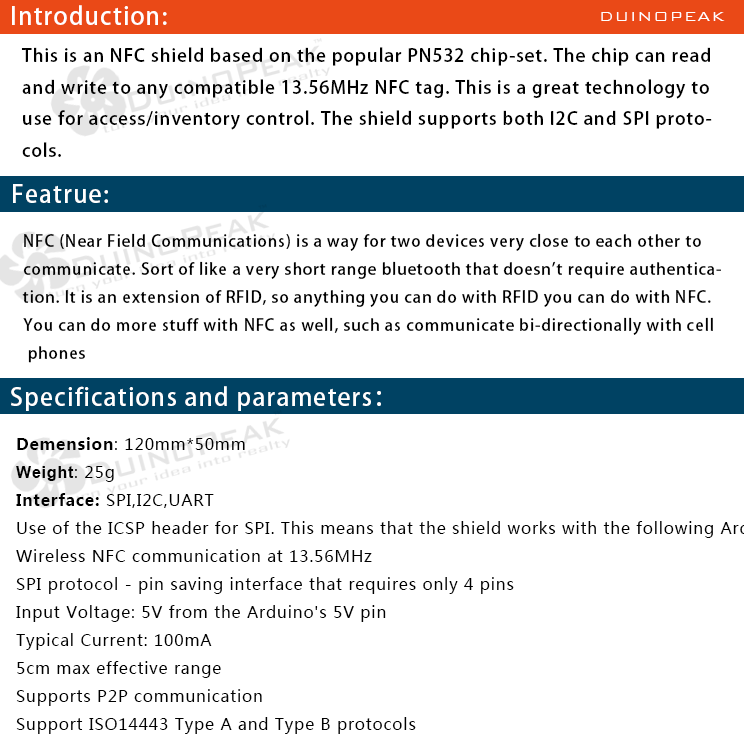
<style>
.page{position:relative;width:744px;height:750px;background:#ffffff}
.page>*{position:absolute;margin:0}
.t1{font:24px "AdobeHeitiStd-Regular";letter-spacing:0.05em;color:#ffffff}
.t2{font:18px "BankGothicBT-Light";letter-spacing:0.05em;color:#ffffff}
.t3{font:18px "AdobeHeitiStd-Regular";letter-spacing:0.05em;color:#000000}
.t4{font:16px "AdobeHeitiStd-Regular";letter-spacing:0.05em;color:#000000}
</style>
<div class="page">
<p class="t1" style="left:12px;top:5px;width:155px;height:20px">Introduction:</p>
<p class="t2" style="left:601px;top:12px;width:124px;height:9px">DUINOPEAK</p>
<p class="t3" style="left:21px;top:47px;width:691px;height:110px">This is an NFC shield based on the popular PN532 chip-set. The chip can read <br>and write to any compatible 13.56MHz NFC tag. This is a great technology to <br>use for access/inventory control. The shield supports both I2C and SPI proto-<br>cols.</p>
<p class="t1" style="left:13px;top:184px;width:95px;height:19px">Featrue:</p>
<p class="t4" style="left:22px;top:233px;width:699px;height:130px">NFC (Near Field Communications) is a way for two devices very close to each other to <br>communicate. Sort of like a very short range bluetooth that doesn't require authentica-<br>tion. It is an extension of RFID, so anything you can do with RFID you can do with NFC. <br>You can do more stuff with NFC as well, such as communicate bi-directionally with cell<br> phones</p>
<p class="t1" style="left:11px;top:386px;width:370px;height:25px">Specifications and parameters：</p>
</div>
